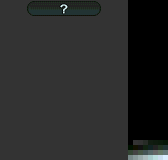
<style>
.page{position:relative;width:168px;height:160px;background:#333333}
.page>*{position:absolute;margin:0}
.t1{font:10.7px "RodinNTLGPro-M";letter-spacing:0.05em;color:#defcfc;font-weight:bold;scale:1.2 1}
</style>
<div class="page">
<p class="t1" style="left:60px;top:4px;width:8px;height:10px">?</p>
</div>
